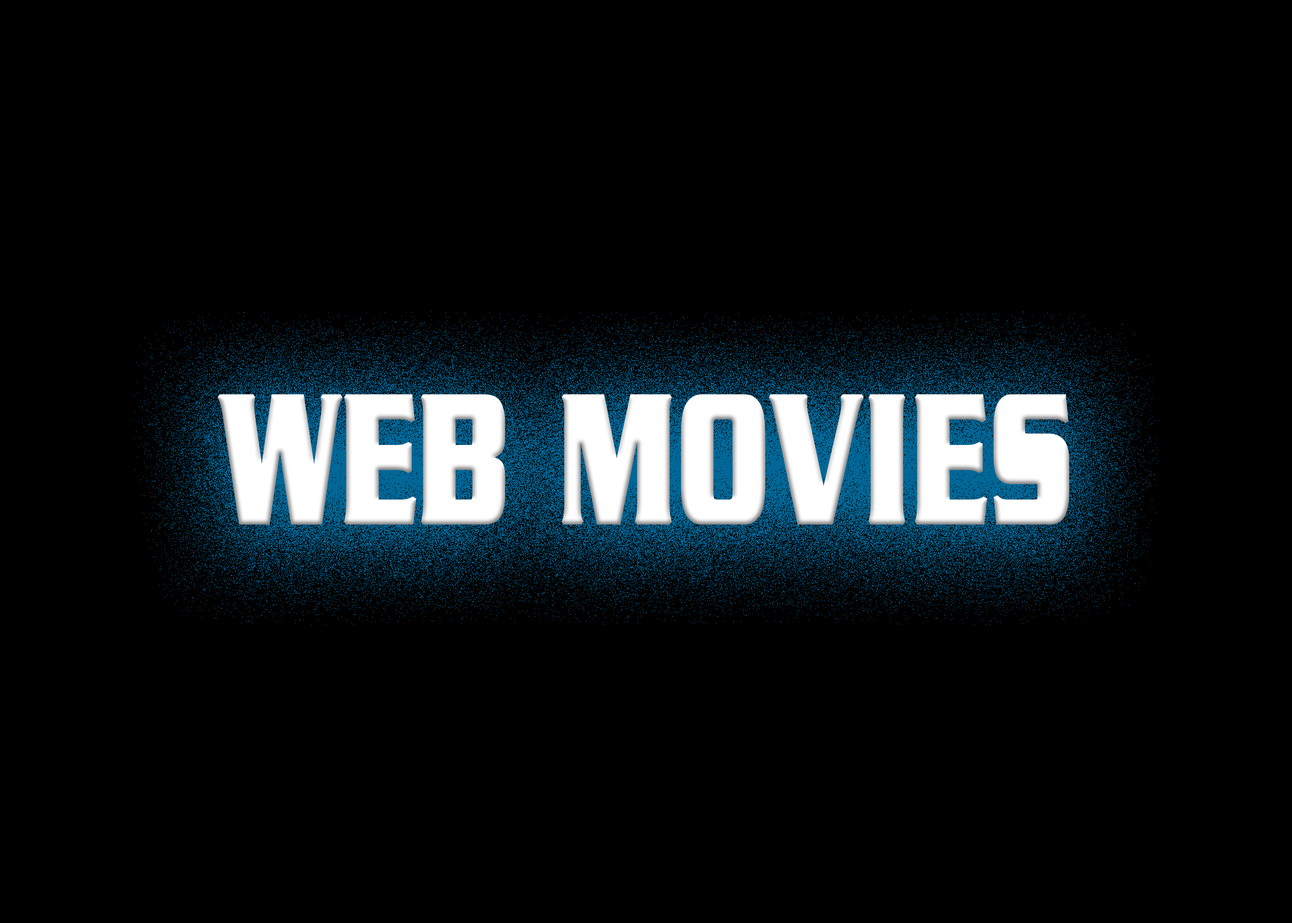
<style>
.page{position:relative;width:1292px;height:923px;background:#000000}
.page>*{position:absolute;margin:0}
.t1{font:196.1px "Babylon5";letter-spacing:0.01em;color:#ffffff;font-weight:bold;scale:0.59 1}
</style>
<div class="page">
<p class="t1" style="left:218px;top:394px;width:851px;height:131px">WEB MOVIES</p>
</div>
